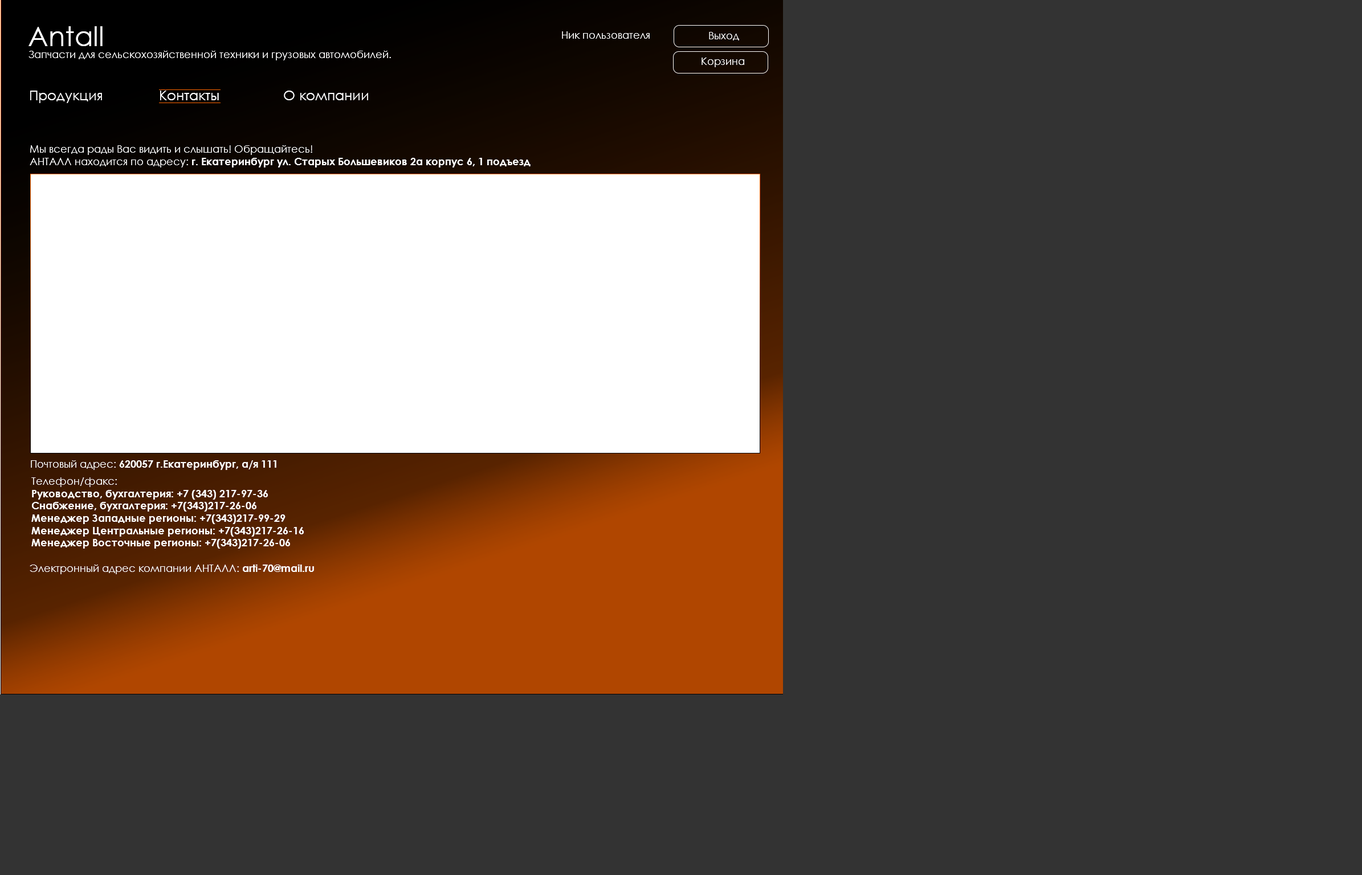
<style>
.page{position:relative;width:1362px;height:875px;background:#333333}
.page>*{position:absolute;margin:0}
.t1{font:27.4px "CenturyGothic";color:#ffffff}
.t2{font:10.3px "CenturyGothic";color:#ffffff}
.t3{font:13.7px "CenturyGothic";color:#ffffff}
.t4{font:10.3px "CenturyGothic-Bold";color:#ffffff}
</style>
<div class="page">
<p class="t1" style="left:28px;top:26px;width:75px;height:20px">Antall</p>
<p class="t2" style="left:562px;top:31px;width:88px;height:8px">Ник пользователя</p>
<p class="t2" style="left:709px;top:32px;width:30px;height:8px">Выход</p>
<p class="t2" style="left:28px;top:51px;width:363px;height:9px">Запчасти для сельскохозяйственной техники и грузовых автомобилей.</p>
<p class="t2" style="left:702px;top:58px;width:42px;height:9px">Корзина</p>
<p class="t3" style="left:30px;top:91px;width:338px;height:12px">Продукция              Контакты                О компании</p>
<p class="t2" style="left:30px;top:145px;width:501px;height:23px">Мы всегда рады Вас видить и слышать! Обращайтесь!<br>АНТАЛЛ находится по адресу: <span class="t4">г. Екатеринбург ул. Старых Большевиков 2а корпус 6, 1 подъезд</span></p>
<p class="t4" style="left:31px;top:461px;width:245px;height:9px"><span class="t2">Почтовый адрес: </span>620057 г.Екатеринбург, а/я 111</p>
<p class="t4" style="left:31px;top:478px;width:273px;height:71px"><span class="t2">Телефон/факс:<br></span>Руководство, бухгалтерия: +7 (343) 217-97-36<br>Снабжение, бухгалтерия: +7(343)217-26-06<br>Менеджер Западные регионы: +7(343)217-99-29<br>Менеджер Центральные регионы: +7(343)217-26-16<br>Менеджер Восточные регионы: +7(343)217-26-06</p>
<p class="t2" style="left:30px;top:565px;width:284px;height:9px">Электронный адрес компании АНТАЛЛ: <span class="t4">arti-70@mail.ru</span></p>
</div>
